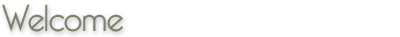
<style>
.page{position:relative;width:400px;height:37px;background:#ffffff}
.page>*{position:absolute;margin:0}
.t1{font:36.8px "BelleroseLight";color:#7c836c}
</style>
<div class="page">
<p class="t1" style="left:2px;top:4px;width:122px;height:28px">Welcome</p>
</div>
